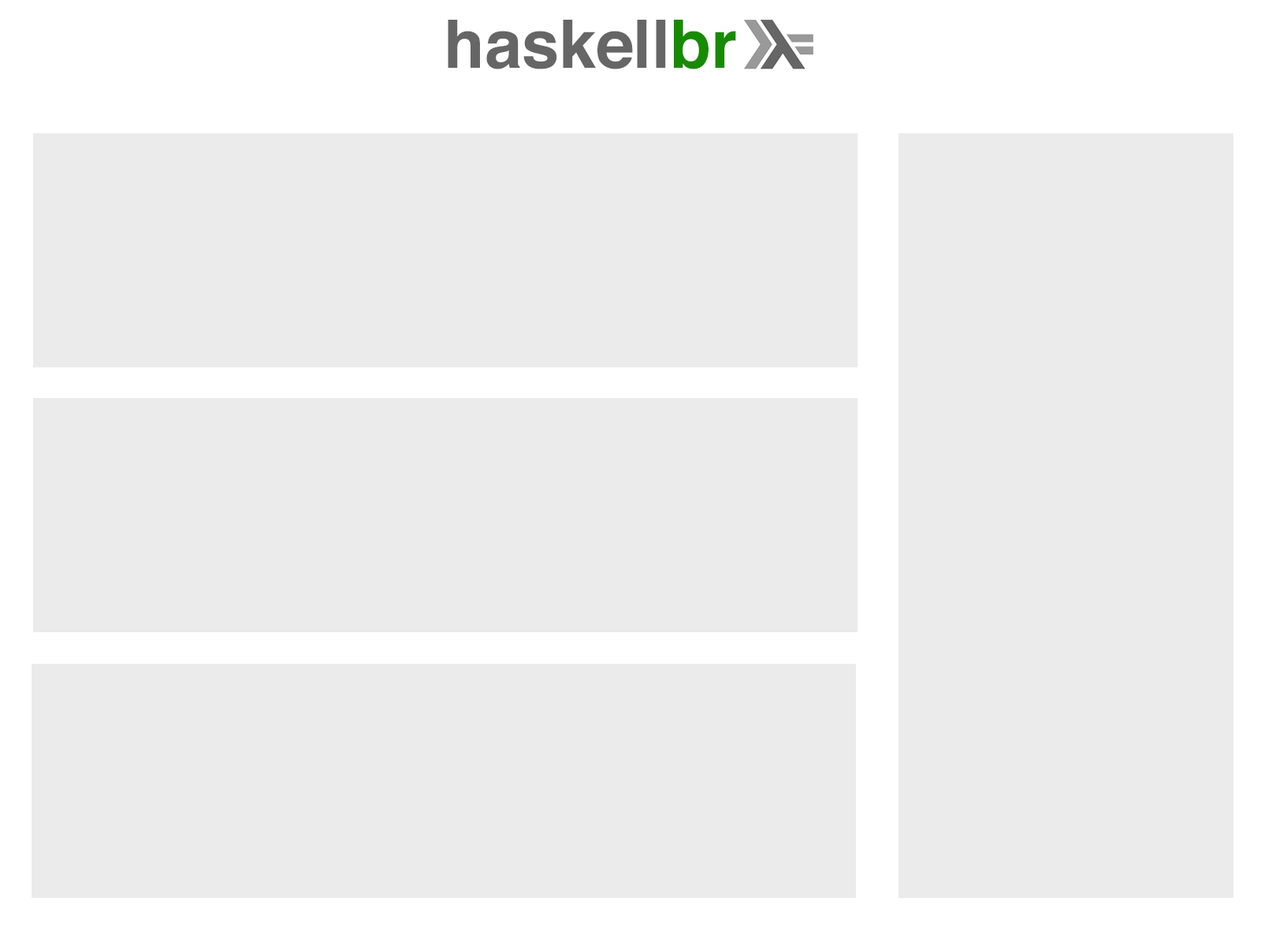
<style>
.page{position:relative;width:1261px;height:946px;background:#ebebeb}
.page>*{position:absolute;margin:0}
.t1{font:67px "Helvetica-Bold";color:#666666}
.t2{font:67px "Helvetica-Bold";color:#178b00}
</style>
<div class="page">
<p class="t1" style="left:448px;top:20px;width:288px;height:49px">haskell<span class="t2">br</span></p>
</div>
